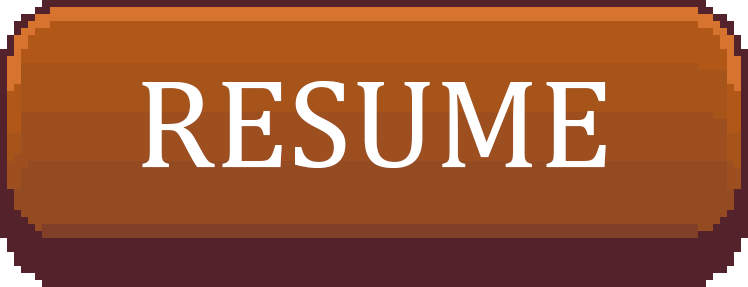
<style>
.page{position:relative;width:748px;height:287px;background:#54222a}
.page>*{position:absolute;margin:0}
.t1{font:128px "Cambria";color:#ffffff}
</style>
<div class="page">
<p class="t1" style="left:142px;top:81px;width:464px;height:87px">RESUME</p>
</div>
